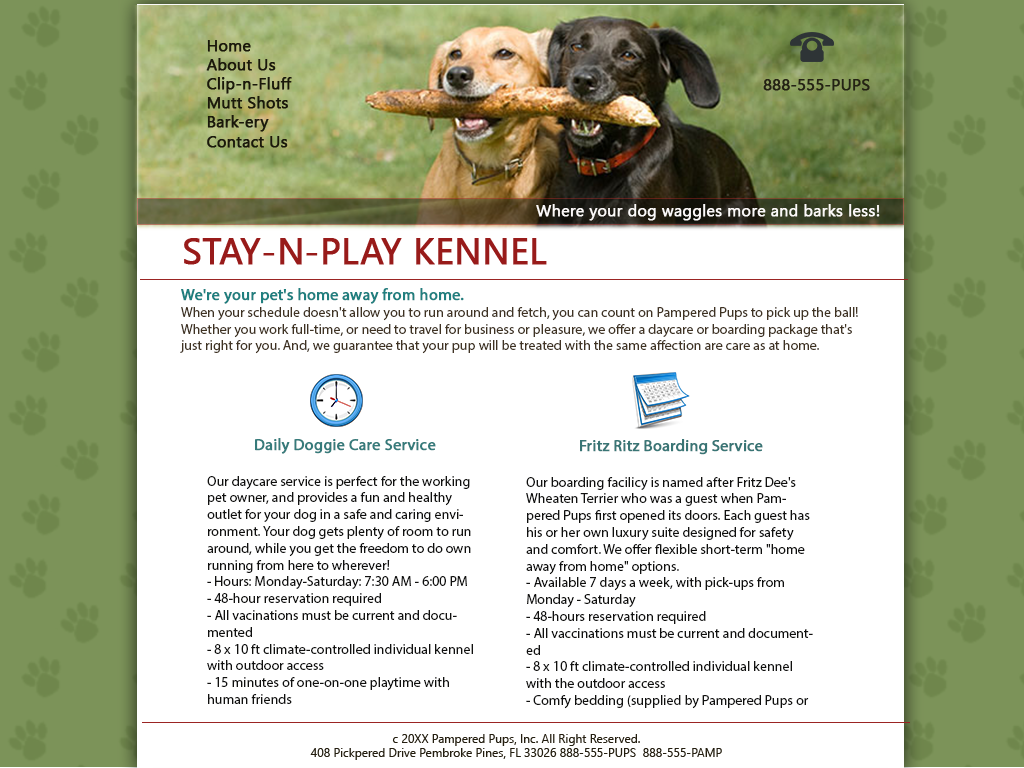
<style>
.page{position:relative;width:1024px;height:768px;background:#ffffff}
.page>*{position:absolute;margin:0}
.t1{font:16px "SegoeUI";color:#1a180b;font-weight:bold}
.t2{font:16px "SegoeUI";color:#242214;font-weight:bold}
.t3{font:16px "SegoeUI";color:#ffffff;font-weight:bold}
.t4{font:16px "SegoeUI";color:#fcf9f9;font-weight:bold}
.t5{font:36px "SegoeUI";color:#981b1a;text-transform:uppercase;font-weight:bold}
.t6{font:14px "MyriadPro-Regular";color:#403323}
.t7{font:16px "MyriadPro-Regular";color:#207f7f;font-weight:bold}
.t8{font:14px "MyriadPro-Regular";color:#10100f}
.t9{font:16px "MyriadPro-Regular";color:#367b7b;font-weight:bold}
.t10{font:16px "MyriadPro-Regular";color:#397575;font-weight:bold}
.t11{font:12px "SegoeUI";color:#241e10}
</style>
<div class="page">
<p class="t1" style="left:206px;top:40px;width:86px;height:108px">Home<br>About Us<br>Clip-n-Fluff<br>Mutt Shots<br>Bark-ery<br>Contact Us</p>
<p class="t2" style="left:763px;top:79px;width:107px;height:12px"><span class="t3"><br></span>888-555-PUPS</p>
<p class="t4" style="left:536px;top:204px;width:344px;height:17px">Where your dog waggles more and barks less!</p>
<p class="t5" style="left:184px;top:238px;width:363px;height:27px">STAY-N-PLAY KENNEL</p>
<p class="t6" style="left:180px;top:288px;width:678px;height:66px"><span class="t7">We're your pet's home away from home.<br></span>When your schedule doesn't allow you to run around and fetch, you can count on Pampered Pups to pick up the ball! Whether you work full-time, or need to travel for business or pleasure, we offer a daycare or boarding package that's just right for you. And, we guarantee that your pup will be treated with the same affection are care as at home.</p>
<p class="t8" style="left:207px;top:438px;width:266px;height:266px;text-align:center"><span class="t9">Daily Doggie Care Service<br><br></span>Our daycare service is perfect for the working pet owner, and provides a fun and healthy outlet for your dog in a safe and caring environment. Your dog gets plenty of room to run around, while you get the freedom to do own running from here to wherever!<br>- Hours: Monday-Saturday: 7:30 AM - 6:00 PM<br>- 48-hour reservation required<br>- All vacinations must be current and documented<br>- 8 x 10 ft climate-controlled individual kennel with outdoor access<br>- 15 minutes of one-on-one playtime with human friends<br>- Unlimited playtime with canine friends as desired<br>- 2 gourmet snacks from The Bark-ery Shop<br>Rates<br>$15 for Full Day<br>$10 for Half Day (Up to 5 Hours)<br>$40 for 3-Day Pre-Pay<br>$70 for 5-Day Pre-Pay<br>$140 for 10-Day Pre-pay</p>
<p class="t8" style="left:526px;top:439px;width:287px;height:270px;text-align:center"><span class="t10">Fritz Ritz Boarding Service<br><br></span>Our boarding facilicy is named after Fritz Dee's Wheaten Terrier who was a guest when Pampered Pups first opened its doors. Each guest has his or her own luxury suite designed for safety and comfort. We offer flexible short-term "home away from home" options.<br>- Available 7 days a week, with pick-ups from Monday - Saturday<br>- 48-hours reservation required<br>- All vaccinations must be current and documented<br>- 8 x 10 ft climate-controlled individual kennel with the outdoor access<br>- Comfy bedding (supplied by Pampered Pups or owner)<br>- 15 minutes of one-on-one playtime with human friends<br>- Additional 15-minute daily walk and exercise<br>- Unlimited playtime with canine friends as desired<br>- Daily feeding (1 or 2 per day as specified by owner)<br>- 2 gourmet snacks per day from The Bark-ery Shop<br>Rates<br>$25 for each Overnight Stay<br>$150 for 1-Week-Stay<br>$275 for 2-Week-stay</p>
<p class="t11" style="left:310px;top:734px;width:412px;height:26px;text-align:center">c 20XX Pampered Pups, Inc. All Right Reserved.<br>408 Pickpered Drive Pembroke Pines, FL 33026 888-555-PUPS  888-555-PAMP</p>
</div>
